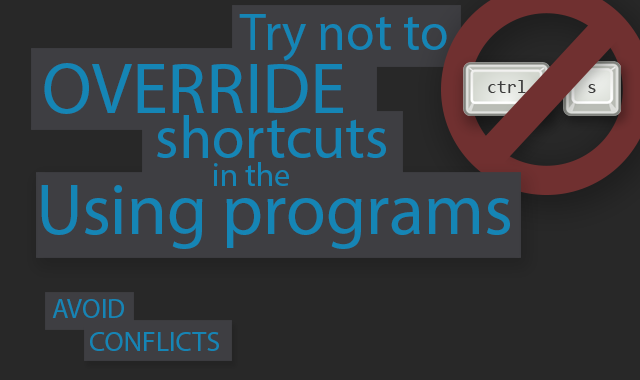
<style>
.page{position:relative;width:640px;height:380px;background:#282828}
.page>*{position:absolute;margin:0}
.t1{font:52px "MyriadPro-Regular";color:#1585b5}
.t2{font:72px "MyriadPro-Regular";color:#1585b5}
.t3{font:60px "MyriadPro-Regular";color:#1585b5}
.t4{font:33px "MyriadPro-Regular";color:#1585b5}
.t5{font:27px "MyriadPro-Regular";color:#1585b5}
.t6{font:28px "MyriadPro-Regular";color:#1585b5}
</style>
<div class="page">
<p class="t1" style="left:239px;top:14px;width:208px;height:47px">Try not to</p>
<p class="t2" style="left:44px;top:63px;width:299px;height:51px">OVERRIDE</p>
<p class="t3" style="left:157px;top:115px;width:229px;height:43px">shortcuts</p>
<p class="t4" style="left:214px;top:162px;width:75px;height:24px">in the</p>
<p class="t2" style="left:41px;top:185px;width:469px;height:64px">Using programs</p>
<p class="t5" style="left:52px;top:299px;width:72px;height:19px">AVOID</p>
<p class="t6" style="left:90px;top:332px;width:129px;height:19px">CONFLICTS</p>
</div>
